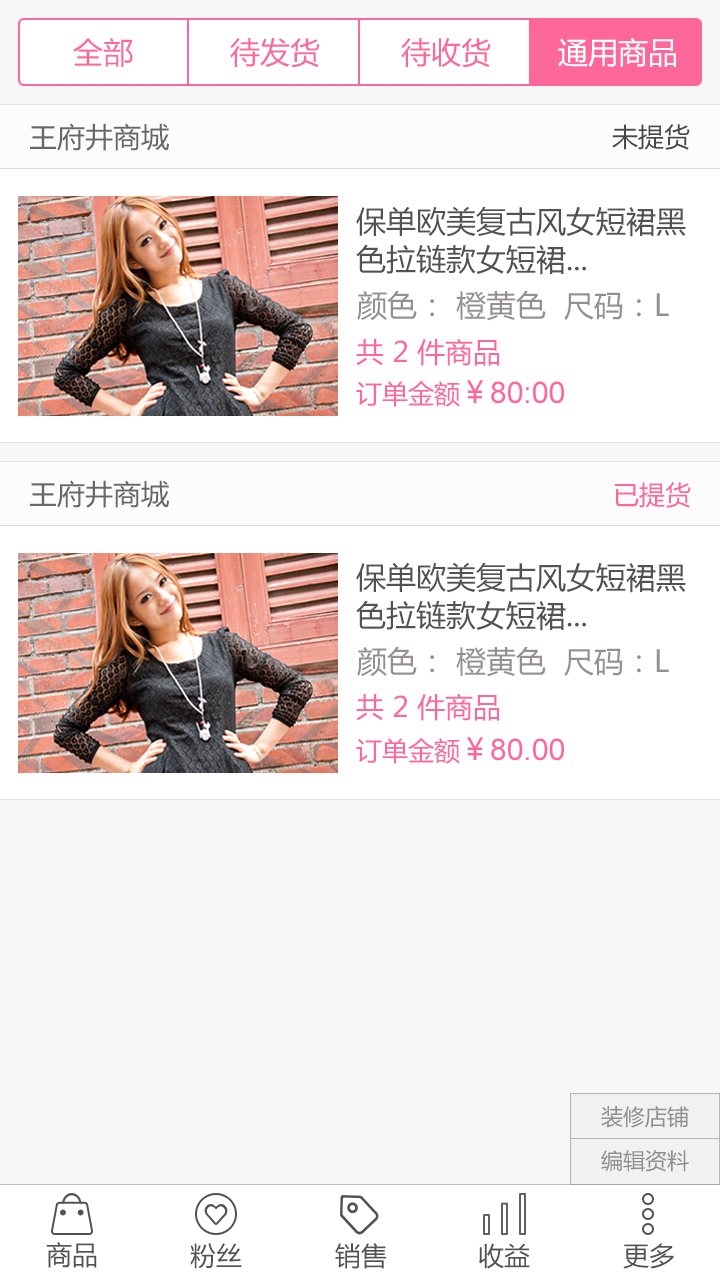
<style>
.page{position:relative;width:720px;height:1280px;background:#ffffff}
.page>*{position:absolute;margin:0}
.t1{font:30px "MicrosoftYaHei";color:#fd679a}
.t2{font:30px "MicrosoftYaHei";color:#ffffff}
.t3{font:28px "MicrosoftYaHei";color:#676767}
.t4{font:26px "MicrosoftYaHei";color:#4a4649}
.t5{font:30px/38px "MicrosoftYaHei";color:#525252}
.t6{font:30px "MicrosoftYaHei";color:#958f93}
.t7{font:28px "MicrosoftYaHei";color:#fd679a}
.t8{font:30px "ArialMT";color:#fd679a}
.t9{font:26px "MicrosoftYaHei";color:#fd679a}
.t10{font:22px "MicrosoftYaHei";color:#8e8e8e}
.t11{font:26px "MicrosoftYaHei";color:#525252}
</style>
<div class="page">
<p class="t1" style="left:73px;top:38px;width:60px;height:29px">全部</p>
<p class="t1" style="left:230px;top:37px;width:90px;height:31px">待发货</p>
<p class="t1" style="left:401px;top:38px;width:90px;height:30px">待收货</p>
<p class="t2" style="left:558px;top:38px;width:118px;height:29px">通用商品</p>
<p class="t3" style="left:30px;top:123px;width:139px;height:28px">王府井商城</p>
<p class="t4" style="left:612px;top:124px;width:78px;height:26px">未提货</p>
<p class="t5" style="left:356px;top:206px;width:330px;height:69px">保单欧美复古风女短裙黑<br>色拉链款女短裙...</p>
<p class="t6" style="left:357px;top:290px;width:312px;height:31px">颜色： 橙黄色  尺码：L</p>
<p class="t7" style="left:356px;top:338px;width:143px;height:28px">共 2 件商品</p>
<p class="t8" style="left:356px;top:380px;width:208px;height:27px"><span class="t9">订单金额</span><span class="t1">￥</span>80:00</p>
<p class="t3" style="left:30px;top:480px;width:139px;height:28px">王府井商城</p>
<p class="t9" style="left:615px;top:482px;width:76px;height:26px">已提货</p>
<p class="t5" style="left:356px;top:562px;width:330px;height:69px">保单欧美复古风女短裙黑<br>色拉链款女短裙...</p>
<p class="t6" style="left:357px;top:646px;width:312px;height:31px">颜色： 橙黄色  尺码：L</p>
<p class="t7" style="left:356px;top:693px;width:143px;height:28px">共 2 件商品</p>
<p class="t8" style="left:356px;top:737px;width:208px;height:27px"><span class="t9">订单金额</span><span class="t1">￥</span>80.00</p>
<p class="t10" style="left:601px;top:1106px;width:88px;height:22px">装修店铺</p>
<p class="t10" style="left:601px;top:1150px;width:88px;height:22px">编辑资料</p>
<p class="t11" style="left:46px;top:1242px;width:51px;height:26px">商品</p>
<p class="t11" style="left:190px;top:1243px;width:52px;height:26px">粉丝</p>
<p class="t11" style="left:335px;top:1243px;width:51px;height:26px">销售</p>
<p class="t11" style="left:479px;top:1243px;width:51px;height:26px">收益</p>
<p class="t11" style="left:623px;top:1243px;width:51px;height:26px">更多</p>
</div>
